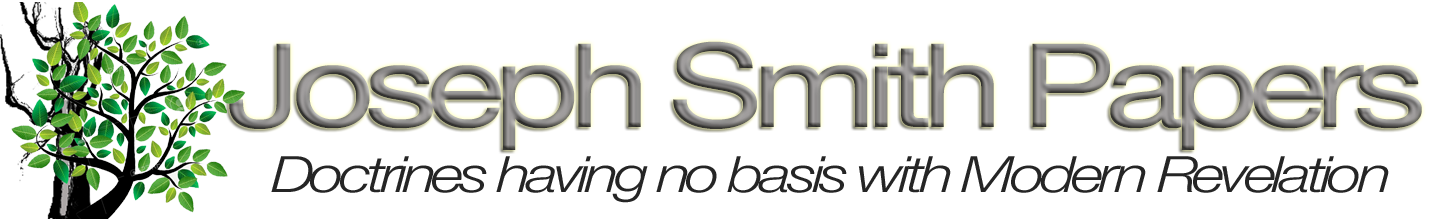
<style>
.page{position:relative;width:1432px;height:219px;background:#ffffff}
.page>*{position:absolute;margin:0}
.t1{font:116.7px "HelveticaNeue";letter-spacing:-0.075em;scale:1.25 1}
.t2{font:50px "HelveticaNeue-LightItalic";letter-spacing:-0.075em;color:#252525;scale:1.25 1}
</style>
<div class="page">
<p class="t1" style="left:229px;top:41px;width:1193px;height:109px">Joseph Smith Papers</p>
<p class="t2" style="left:271px;top:156px;width:1118px;height:47px">Doctrines having no basis with Modern Revelation</p>
</div>
